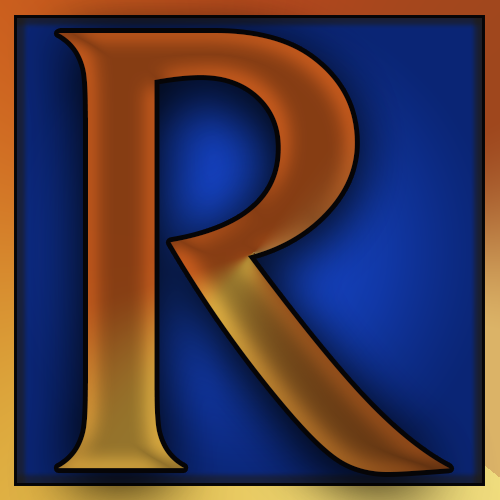
<style>
.page{position:relative;width:500px;height:500px}
.page>*{position:absolute;margin:0}
.t1{font:626.3px "FrizQuadrataTT";letter-spacing:0.1em}
</style>
<div class="page">
<p class="t1" style="left:58px;top:33px;width:392px;height:439px">R</p>
</div>
